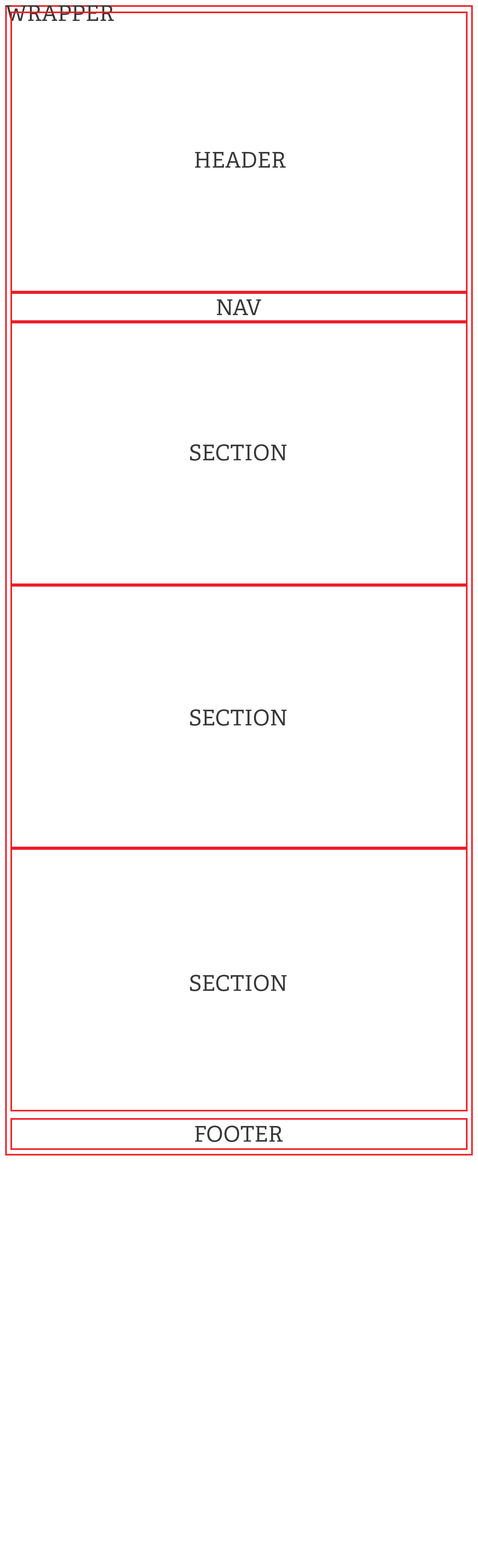
<style>
.page{position:relative;width:478px;height:1568px;background:#ffffff}
.page>*{position:absolute;margin:0}
.t1{font:21.8px "AdellePE";color:#393939}
</style>
<div class="page">
<p class="t1" style="left:5px;top:5px;width:109px;height:16px">WRAPPER</p>
<p class="t1" style="left:195px;top:152px;width:91px;height:16px">HEADER</p>
<p class="t1" style="left:217px;top:299px;width:44px;height:16px">NAV</p>
<p class="t1" style="left:190px;top:444px;width:97px;height:17px">SECTION</p>
<p class="t1" style="left:190px;top:709px;width:97px;height:17px">SECTION</p>
<p class="t1" style="left:190px;top:975px;width:97px;height:16px">SECTION</p>
<p class="t1" style="left:195px;top:1126px;width:88px;height:16px">FOOTER</p>
</div>
